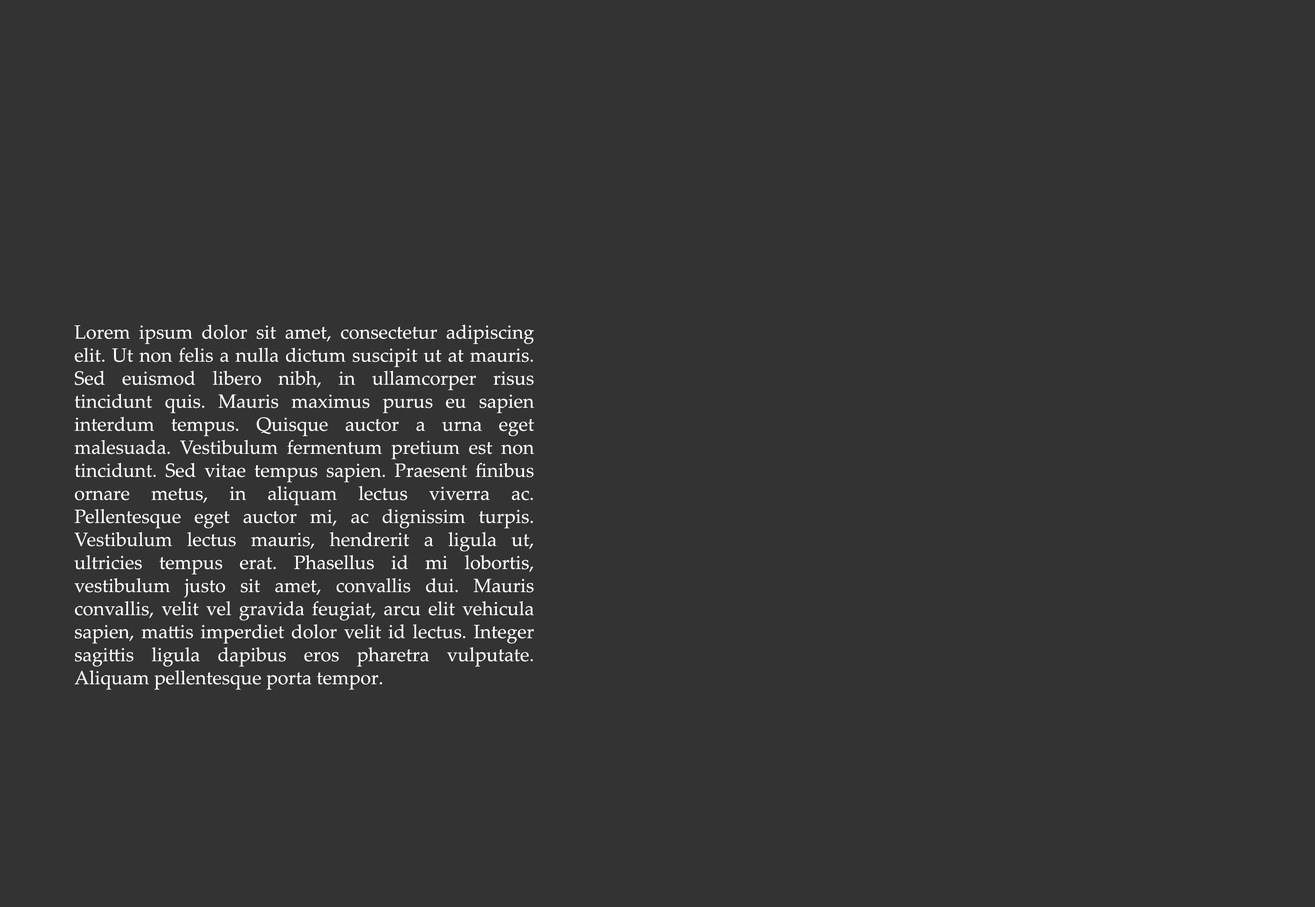
<style>
.page{position:relative;width:1315px;height:907px;background:#333333}
.page>*{position:absolute;margin:0}
.t1{font:19.2px "PalatinoLinotype-Roman";color:#ffffff}
.t2{font:16px "PalatinoLinotype-Roman";color:#ffffff}
</style>
<div class="page">
<p class="t1" style="left:74px;top:324px;width:460px;height:366px"><span class="t2"><br></span>Lorem ipsum dolor sit amet, consectetur adipiscing elit. Ut non felis a nulla dictum suscipit ut at mauris. Sed euismod libero nibh, in ullamcorper risus tincidunt quis. Mauris maximus purus eu sapien interdum tempus. Quisque auctor a urna eget malesuada. Vestibulum fermentum pretium est non tincidunt. Sed vitae tempus sapien. Praesent finibus ornare metus, in aliquam lectus viverra ac. Pellentesque eget auctor mi, ac dignissim turpis. Vestibulum lectus mauris, hendrerit a ligula ut, ultricies tempus erat. Phasellus id mi lobortis, vestibulum justo sit amet, convallis dui. Mauris convallis, velit vel gravida feugiat, arcu elit vehicula sapien, mattis imperdiet dolor velit id lectus. Integer sagittis ligula dapibus eros pharetra vulputate. Aliquam pellentesque porta tempor.</p>
</div>
